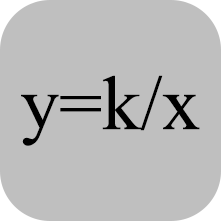
<style>
.page{position:relative;width:221px;height:221px;background:#bfbfbf}
.page>*{position:absolute;margin:0}
.t1{font:76.7px "TimesNewRomanPSMT";color:#000000}
</style>
<div class="page">
<p class="t1" style="left:21px;top:75px;width:179px;height:71px">y=k/x</p>
</div>
